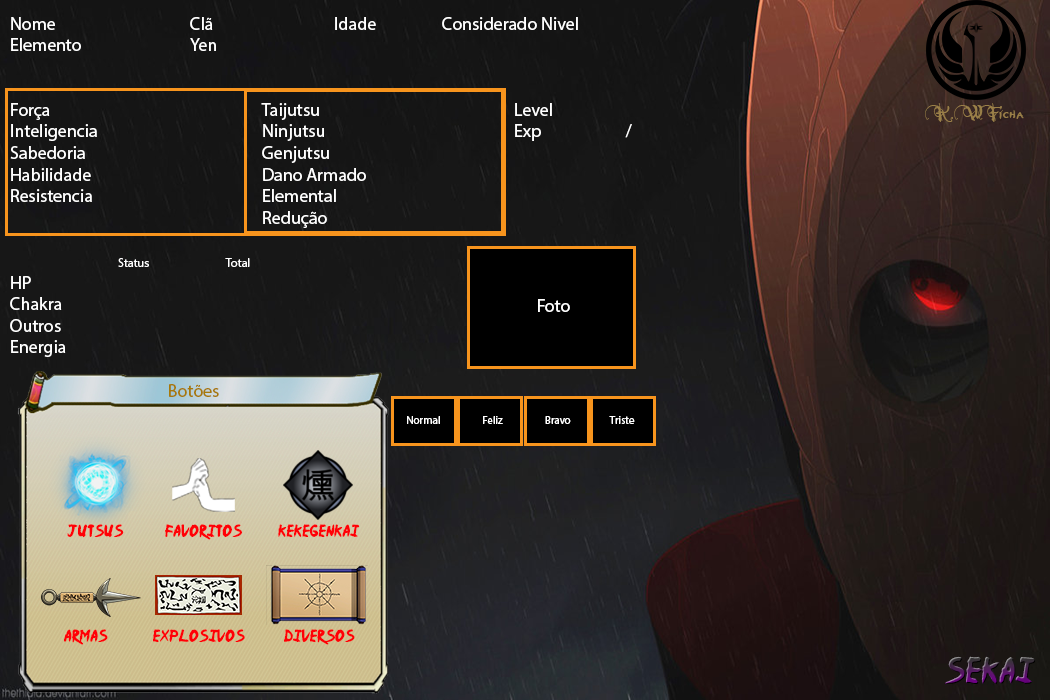
<style>
.page{position:relative;width:1050px;height:700px}
.page>*{position:absolute;margin:0}
.t1{font:18px "MyriadPro-Regular";color:#ffffff}
.t2{font:12px "MyriadPro-Regular";color:#ffffff}
.t3{font:18px "MyriadPro-Regular";color:#a7790a}
.t4{font:18px "NeverwinterNormal";color:#9a7f48}
.t5{font:11px "MyriadPro-Regular";color:#ffffff}
.t6{font:14px "Ninja-Naruto";color:#ff0006}
.t7{font:30px "Ninja-Naruto"}
</style>
<div class="page">
<p class="t1" style="left:11px;top:17px;width:567px;height:34px">Nome    Clã    Idade  Considerado Nivel   <br>Elemento    Yen</p>
<p class="t1" style="left:10px;top:103px;width:622px;height:294px">Força      Taijutsu      Level<br>Inteligencia     Ninjutsu      Exp    /<br>Sabedoria     Genjutsu<br>Habilidade     Dano Armado<br>Resistencia     Elemental<br>       Redução<br><br> <span class="t2">   Status   Total  </span> <br>HP                 <br>Chakra<br>Outros<br>Energia<br> <br>                <span class="t3">Botões</span></p>
<p class="t4" style="left:925px;top:103px;width:99px;height:19px">K.W Ficha</p>
<p class="t1" style="left:538px;top:299px;width:32px;height:13px">Foto</p>
<p class="t5" style="left:407px;top:416px;width:228px;height:8px">Normal                  Feliz                  Bravo                 Triste</p>
<p class="t6" style="left:67px;top:524px;width:293px;height:16px">Jutsus     Favoritos         Kekegenkai</p>
<p class="t6" style="left:64px;top:629px;width:291px;height:16px">aRMAS                 Explosivos  Diversos</p>
<p class="t7" style="left:945px;top:656px;width:91px;height:28px">Sekai</p>
</div>
